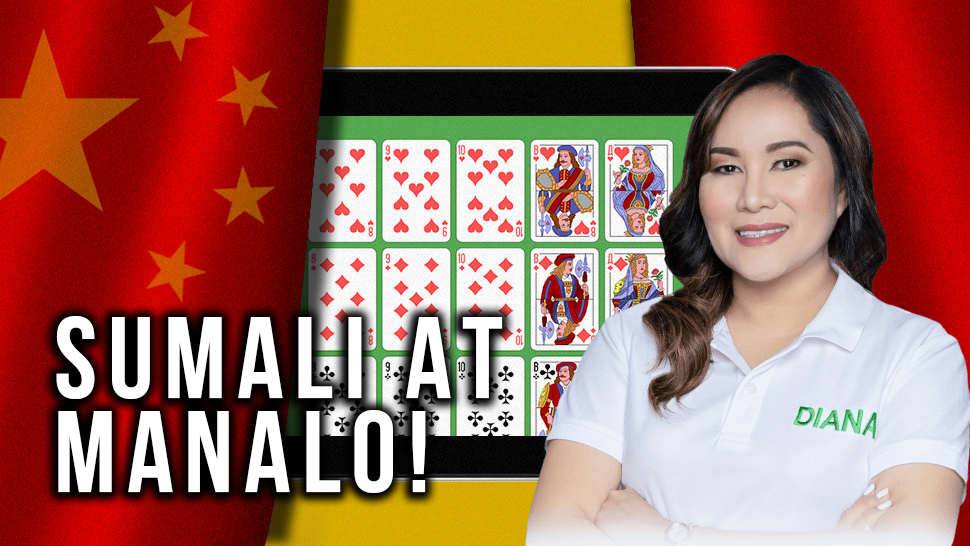
<style>
.page{position:relative;width:970px;height:546px}
.page>*{position:absolute;margin:0}
.t1{font:115.5px/94.5px "BebasNeueBold";letter-spacing:0.091em;color:#ffffff}
</style>
<div class="page">
<p class="t1" style="left:56px;top:316px;width:447px;height:177px">Sumali at <br>Manalo!</p>
</div>
